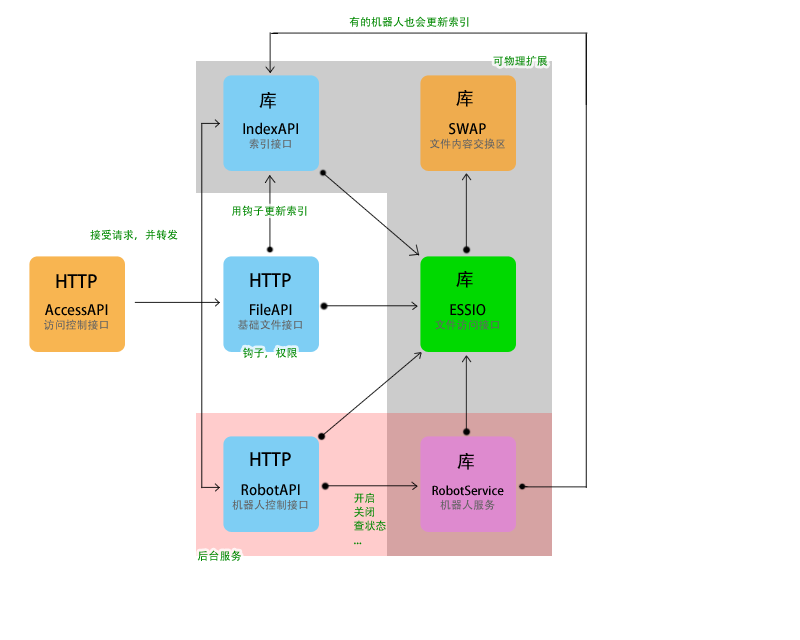
<style>
.page{position:relative;width:800px;height:640px;background:#ffffff}
.page>*{position:absolute;margin:0}
.t1{font:11px "AdobeHeitiStd-Regular";color:#008800}
.t2{font:11px "AdobeHeitiStd-Regular"}
.t3{font:18px "AdobeHeitiStd-Regular";color:#000000}
.t4{font:14px/14px "AdobeHeitiStd-Regular";color:#000000}
.t5{font:11px/14px "AdobeHeitiStd-Regular";color:#626262}
.t6{font:12px/14px "AdobeHeitiStd-Regular";color:#000000}
.t7{font:11px/14px "AdobeHeitiStd-Regular";color:#008800}
</style>
<div class="page">
<p class="t1" style="left:349px;top:16px;width:120px;height:11px">有的机器人也会更新索引</p>
<p class="t2" style="left:493px;top:55px;width:55px;height:11px">可物理扩展</p>
<p class="t3" style="left:259px;top:92px;width:17px;height:17px">库</p>
<p class="t3" style="left:456px;top:90px;width:17px;height:17px">库</p>
<p class="t4" style="left:243px;top:122px;width:55px;height:27px;text-align:center">IndexAPI<br><span class="t5">索引接口</span></p>
<p class="t5" style="left:430px;top:123px;width:75px;height:26px;text-align:center"><span class="t4">SWAP<br></span>文件内容交换区</p>
<p class="t1" style="left:232px;top:205px;width:75px;height:11px">用钩子更新索引</p>
<p class="t1" style="left:90px;top:229px;width:88px;height:11px">接受请求，并转发</p>
<p class="t3" style="left:56px;top:274px;width:41px;height:14px">HTTP</p>
<p class="t3" style="left:250px;top:273px;width:41px;height:14px">HTTP</p>
<p class="t3" style="left:456px;top:271px;width:17px;height:17px">库</p>
<p class="t4" style="left:44px;top:304px;width:64px;height:26px;text-align:center">AccessAPI<br><span class="t5">访问控制接口</span></p>
<p class="t4" style="left:238px;top:303px;width:64px;height:27px;text-align:center">FileAPI<br><span class="t5">基础文件接口</span></p>
<p class="t5" style="left:435px;top:304px;width:64px;height:26px;text-align:center"><span class="t4">ESSIO<br></span>文件访问接口</p>
<p class="t1" style="left:243px;top:347px;width:54px;height:11px">钩子，权限</p>
<p class="t3" style="left:250px;top:452px;width:41px;height:14px">HTTP</p>
<p class="t3" style="left:457px;top:453px;width:17px;height:17px">库</p>
<p class="t4" style="left:232px;top:483px;width:76px;height:27px;text-align:center">RobotAPI<br><span class="t5">机器人控制接口</span></p>
<p class="t6" style="left:432px;top:485px;width:72px;height:25px;text-align:center">RobotService<br><span class="t5">机器人服务</span></p>
<p class="t7" style="left:354px;top:492px;width:32px;height:53px">开启<br>关闭<br>查状态<br>...</p>
<p class="t1" style="left:197px;top:550px;width:44px;height:11px">后台服务</p>
</div>
